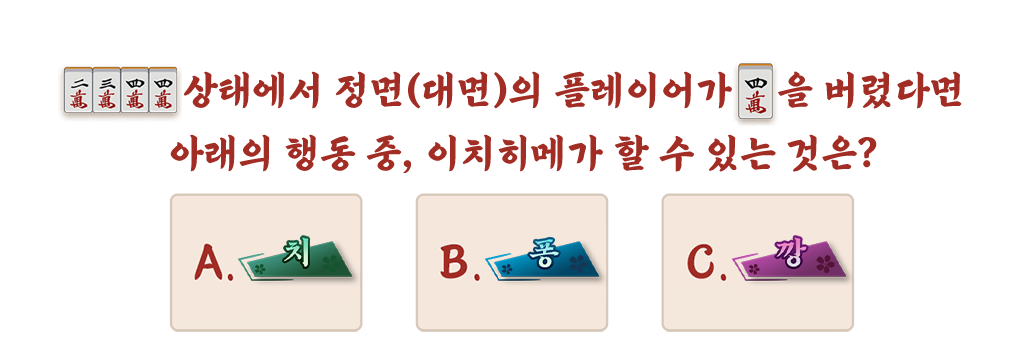
<style>
.page{position:relative;width:1024px;height:351px;background:#ffffff}
.page>*{position:absolute;margin:0}
.t1{font:40px/63px "Dokrip";letter-spacing:-0.015em;color:#a22d24}
</style>
<div class="page">
<p class="t1" style="left:170px;top:71px;width:792px;height:102px;text-align:center">상태에서 정면(대면)의 플레이어가 　을 버렸다면　<br>아래의 행동 중, 이치히메가 할 수 있는 것은?</p>
</div>
